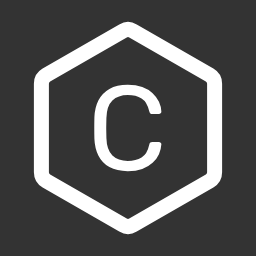
<style>
.page{position:relative;width:256px;height:256px;background:#333333}
.page>*{position:absolute;margin:0}
.t1{font:120px "Rubik-Regular";color:#ffffff}
</style>
<div class="page">
<p class="t1" style="left:94px;top:84px;width:68px;height:88px">C</p>
</div>
